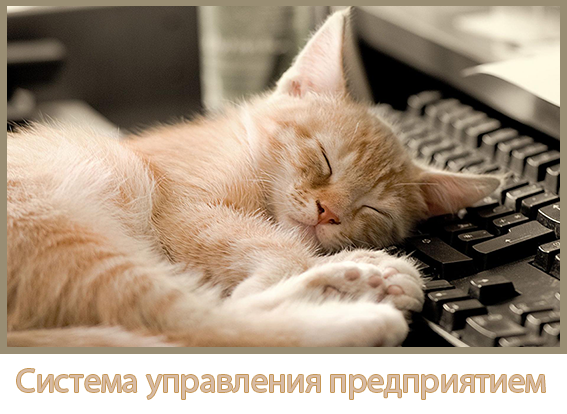
<style>
.page{position:relative;width:567px;height:414px}
.page>*{position:absolute;margin:0}
.t1{font:34px "MyriadPro-Regular";color:#d7bba5}
</style>
<div class="page">
<p class="t1" style="left:17px;top:369px;width:528px;height:30px">Система управления предприятием</p>
</div>
